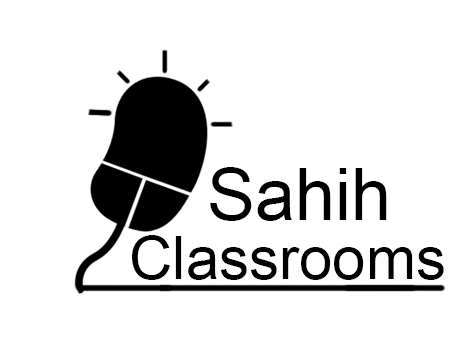
<style>
.page{position:relative;width:454px;height:340px;background:#ffffff}
.page>*{position:absolute;margin:0}
.t1{font:72px "ArialMT";color:#000000}
.t2{font:60px "ArialMT";color:#000000}
</style>
<div class="page">
<p class="t1" style="left:210px;top:167px;width:177px;height:54px">Sahih</p>
<p class="t2" style="left:132px;top:235px;width:312px;height:45px">Classrooms</p>
</div>
